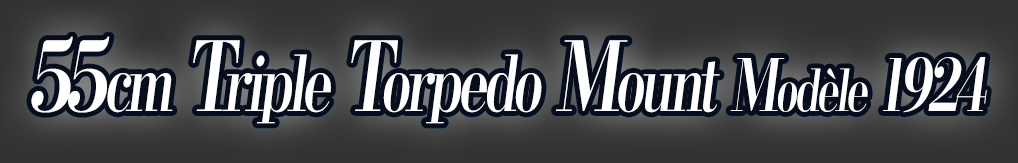
<style>
.page{position:relative;width:1018px;height:163px;background:#333333}
.page>*{position:absolute;margin:0}
.t1{font:76.8px "KochoStd-Heavy";letter-spacing:-0.08em;color:#ffffff;font-style:italic;scale:0.72 1}
.t2{font:96px "KochoStd-Heavy";letter-spacing:-0.08em;color:#ffffff;font-style:italic;scale:0.72 1}
.t3{font:72px "KochoStd-Heavy";letter-spacing:-0.08em;color:#ffffff;font-style:italic;scale:0.72 1}
.t4{font:57.6px "KochoStd-Heavy";letter-spacing:-0.08em;color:#ffffff;font-style:italic;scale:0.72 1}
</style>
<div class="page">
<p class="t1" style="left:31px;top:36px;width:956px;height:88px"><span class="t2">55</span>cm<span class="t2"> T</span>riple<span class="t2"> T</span>orpedo<span class="t2"> M</span>ount <span class="t3">M</span><span class="t4">odèle </span><span class="t3">1924</span></p>
</div>
